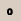
<style>
.page{position:relative;width:21px;height:21px;background:#d9cdc1}
.page>*{position:absolute;margin:0}
.t1{font:9px "Tahoma-Bold";color:#000000}
</style>
<div class="page">
<p class="t1" style="left:7px;top:8px;width:6px;height:7px">0</p>
</div>
